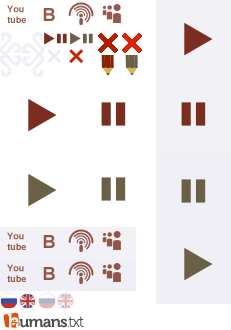
<style>
.page{position:relative;width:231px;height:330px;background:#ffffff}
.page>*{position:absolute;margin:0}
.t1{font:8.9px "Arial-BoldMT";color:#95584d}
.t2{font:17.9px "Arial-BoldMT";color:#95584d}
.t3{font:8.9px "Arial-BoldMT";color:#93554a}
.t4{font:17.9px "Arial-BoldMT";color:#93554a}
.t5{font:8.9px "Arial-BoldMT";color:#92554a}
.t6{font:17.9px "Arial-BoldMT";color:#92554a}
</style>
<div class="page">
<p class="t1" style="left:7px;top:5px;width:19px;height:18px">You<br>tube</p>
<p class="t2" style="left:43px;top:8px;width:12px;height:13px">B</p>
<p class="t3" style="left:7px;top:232px;width:19px;height:18px">You<br>tube</p>
<p class="t4" style="left:43px;top:235px;width:12px;height:13px">B</p>
<p class="t5" style="left:7px;top:264px;width:19px;height:18px">You<br>tube</p>
<p class="t6" style="left:43px;top:267px;width:12px;height:13px">B</p>
</div>
